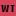
<style>
.page{position:relative;width:16px;height:16px;background:#d54458}
.page>*{position:absolute;margin:0}
.t1{font:9px "Impact";letter-spacing:-0.001em;color:#000000}
</style>
<div class="page">
<p class="t1" style="left:1px;top:5px;width:14px;height:7px">W T</p>
</div>
